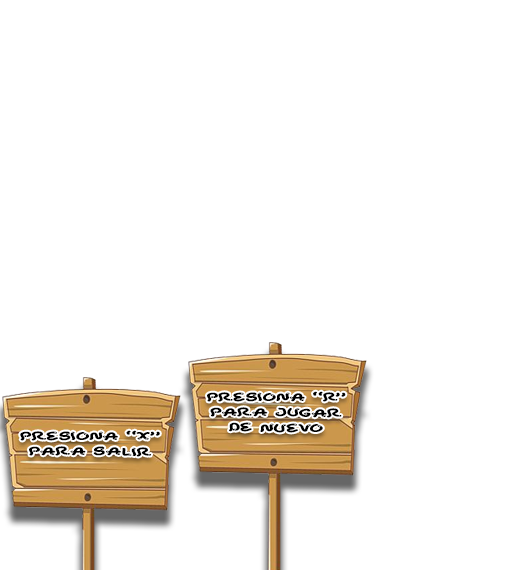
<style>
.page{position:relative;width:516px;height:570px;background:#ffffff}
.page>*{position:absolute;margin:0}
.t1{font:10.1px/15.2px "SnakeChan";color:#000000;scale:1.63 1}
</style>
<div class="page">
<p class="t1" style="left:207px;top:391px;width:139px;height:42px;text-align:center">Presiona “r”<br>para jugar<br>de nuevo</p>
<p class="t1" style="left:20px;top:430px;width:140px;height:27px;text-align:center">Presiona “x”<br>para salir</p>
</div>
